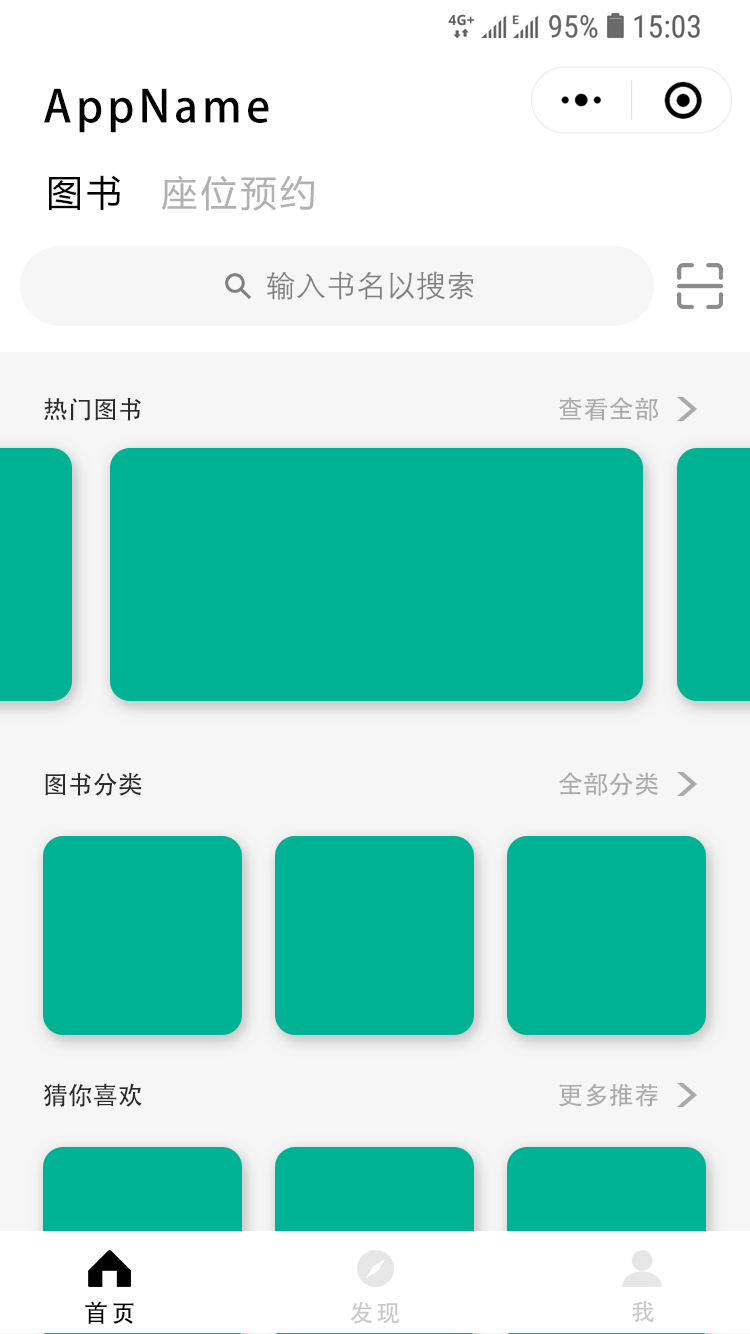
<style>
.page{position:relative;width:750px;height:1334px;background:#00b294}
.page>*{position:absolute;margin:0}
.t1{font:44px "AdobeHeitiStd-Regular";letter-spacing:0.1em;color:#000000}
.t2{font:36px "MicrosoftYaHeiUI";letter-spacing:0.1em;color:#000000}
.t3{font:36px "MicrosoftYaHeiUI";letter-spacing:0.1em;color:#b1b1b1}
.t4{font:30px "DengXian-Regular";color:#808080}
.t5{font:25px "AdobeHeitiStd-Regular";color:#2b2b2b}
.t6{font:25px "AdobeHeitiStd-Regular";color:#aaaaaa}
.t7{font:24.1px "AdobeHeitiStd-Regular";letter-spacing:0.12em;color:#000000}
.t8{font:24.1px "AdobeHeitiStd-Regular";letter-spacing:0.12em;color:#c8c8c8}
</style>
<div class="page">
<p class="t1" style="left:44px;top:88px;width:225px;height:45px">AppName</p>
<p class="t2" style="left:49px;top:175px;width:71px;height:35px">图书</p>
<p class="t3" style="left:161px;top:175px;width:153px;height:36px">座位预约</p>
<p class="t4" style="left:267px;top:271px;width:207px;height:29px">输入书名以搜索</p>
<p class="t5" style="left:44px;top:397px;width:97px;height:24px">热门图书</p>
<p class="t6" style="left:559px;top:397px;width:99px;height:24px">查看全部</p>
<p class="t5" style="left:45px;top:772px;width:96px;height:24px">图书分类</p>
<p class="t6" style="left:558px;top:772px;width:100px;height:24px">全部分类</p>
<p class="t5" style="left:43px;top:1083px;width:99px;height:24px">猜你喜欢</p>
<p class="t6" style="left:559px;top:1083px;width:99px;height:24px">更多推荐</p>
<p class="t7" style="left:85px;top:1301px;width:49px;height:23px">首页</p>
<p class="t8" style="left:350px;top:1302px;width:50px;height:22px">发现</p>
<p class="t8" style="left:632px;top:1300px;width:22px;height:23px">我</p>
</div>
